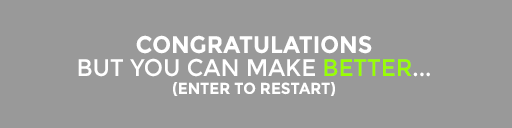
<style>
.page{position:relative;width:512px;height:128px;background:#999999}
.page>*{position:absolute;margin:0}
.t1{font:16px/4px "Montserrat-Bold";color:#ffffff;text-transform:uppercase;scale:0.95 1}
.t2{font:24px/8px "Montserrat-Bold";color:#ffffff;text-transform:uppercase;scale:0.95 1}
.t3{font:24px/8px "Montserrat-Regular";color:#ffffff;text-transform:uppercase;scale:0.95 1}
.t4{font:24px/8px "Montserrat-Regular";color:#99ff00;text-transform:uppercase;scale:0.95 1}
</style>
<div class="page">
<p class="t1" style="left:78px;top:35px;width:352px;height:61px;text-align:center"><span class="t2">Congratulations<br></span><span class="t3">but you can make </span><span class="t4">better</span><span class="t3">...<br></span>(enter to restart)</p>
</div>
